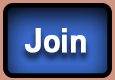
<style>
.page{position:relative;width:115px;height:80px}
.page>*{position:absolute;margin:0}
.t1{font:29.5px "S-CoreDream-6Bold";color:#ffffff;font-weight:bold}
</style>
<div class="page">
<p class="t1" style="left:25px;top:28px;width:61px;height:25px">Join</p>
</div>
